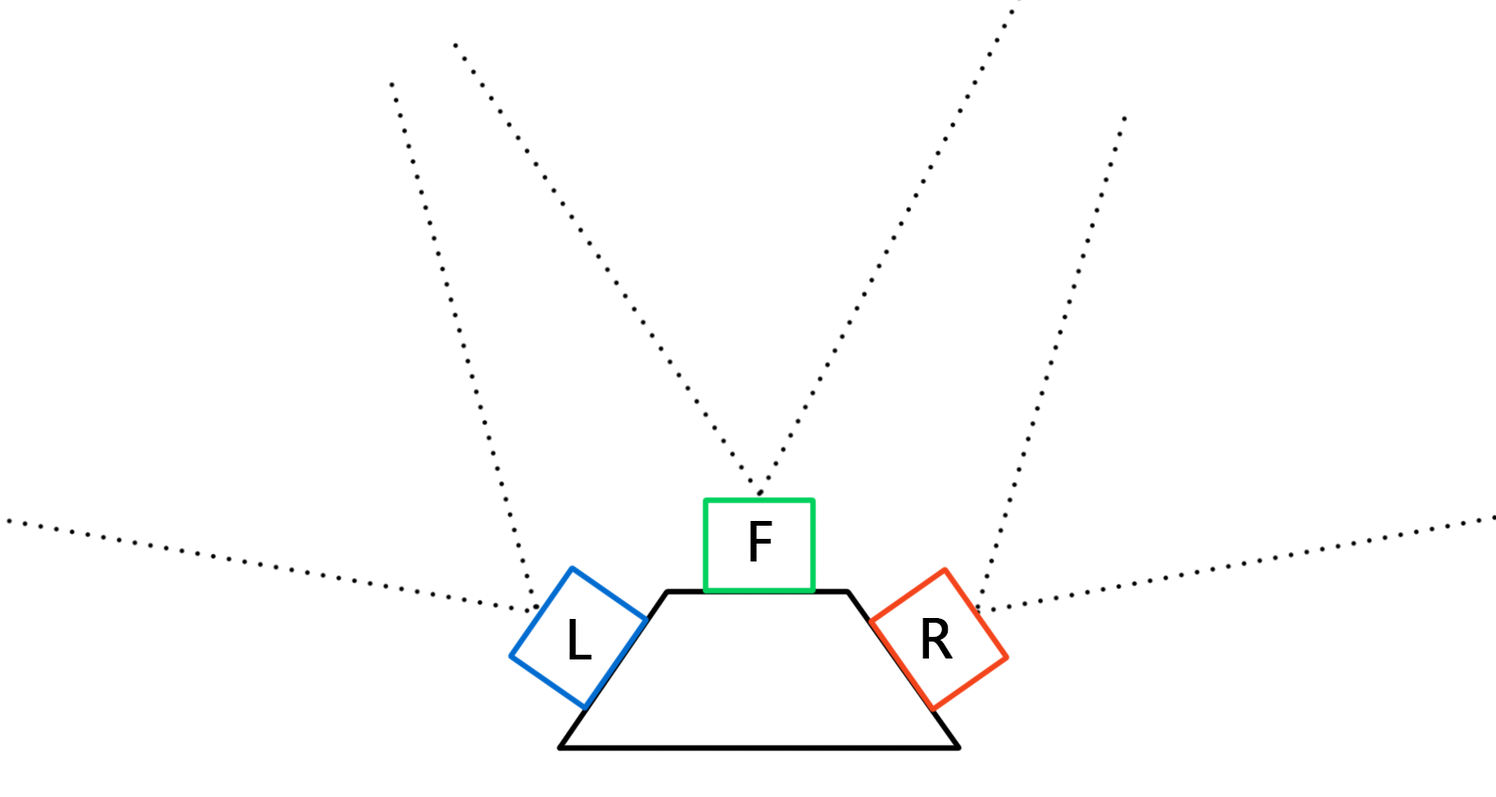
<style>
.page{position:relative;width:1496px;height:797px;background:#ffffff}
.page>*{position:absolute;margin:0}
.t1{font:56.5px "MicrosoftTaiLe";color:#000000;font-weight:bold}
</style>
<div class="page">
<p class="t1" style="left:750px;top:521px;width:23px;height:41px">F</p>
<p class="t1" style="left:569px;top:619px;width:23px;height:40px">L</p>
<p class="t1" style="left:922px;top:618px;width:31px;height:41px">R</p>
</div>
